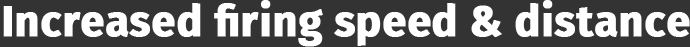
<style>
.page{position:relative;width:690px;height:47px;background:#333333}
.page>*{position:absolute;margin:0}
.t1{font:42.7px "FiraSans-Bold";color:#ffffff;font-weight:bold}
</style>
<div class="page">
<p class="t1" style="left:3px;top:0px;width:687px;height:47px">Increased firing speed &amp; distance</p>
</div>
